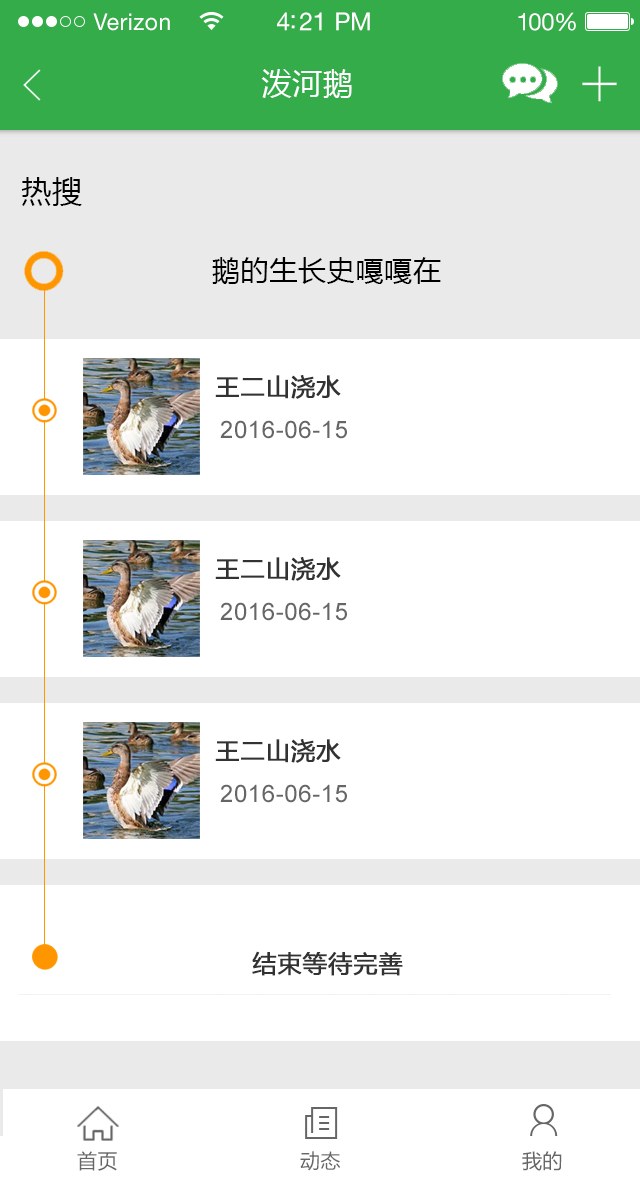
<style>
.page{position:relative;width:640px;height:1193px;background:#ffffff}
.page>*{position:absolute;margin:0}
.t1{font:23px "HelveticaNeueLTStd-Roman";letter-spacing:0.02em;color:#ffffff}
.t2{font:25px "HelveticaNeueLTStd-Roman";letter-spacing:-0.02em;color:#ffffff}
.t3{font:24px "HelveticaNeueLTStd-Roman";letter-spacing:-0.02em;color:#ffffff}
.t4{font:30px "MicrosoftYaHei";letter-spacing:0.025em;color:#ffffff}
.t5{font:30px "MicrosoftYaHei";letter-spacing:0.025em;color:#030303}
.t6{font:28px "MicrosoftYaHei";letter-spacing:0.025em;color:#000000}
.t7{font:24px "MicrosoftYaHei";letter-spacing:0.025em;color:#323232;font-weight:bold}
.t8{font:24px "ArialMT";letter-spacing:0.025em;color:#666666}
.t9{font:20px "MicrosoftYaHei";letter-spacing:0.025em;color:#666666}
</style>
<div class="page">
<p class="t1" style="left:93px;top:13px;width:77px;height:18px">Verizon</p>
<p class="t2" style="left:277px;top:12px;width:93px;height:19px">4:21 PM</p>
<p class="t3" style="left:518px;top:12px;width:58px;height:19px">100%</p>
<p class="t4" style="left:261px;top:69px;width:91px;height:29px">泼河鹅</p>
<p class="t5" style="left:21px;top:177px;width:61px;height:29px">热搜</p>
<p class="t6" style="left:212px;top:257px;width:229px;height:27px">鹅的生长史嘎嘎在</p>
<p class="t7" style="left:215px;top:375px;width:126px;height:24px">王二山浇水</p>
<p class="t8" style="left:220px;top:420px;width:127px;height:19px">2016-06-15</p>
<p class="t7" style="left:215px;top:557px;width:126px;height:24px">王二山浇水</p>
<p class="t8" style="left:220px;top:602px;width:127px;height:19px">2016-06-15</p>
<p class="t7" style="left:215px;top:739px;width:126px;height:24px">王二山浇水</p>
<p class="t8" style="left:220px;top:784px;width:127px;height:19px">2016-06-15</p>
<p class="t7" style="left:252px;top:951px;width:151px;height:25px">结束等待完善</p>
<p class="t9" style="left:77px;top:1151px;width:40px;height:20px">首页</p>
<p class="t9" style="left:300px;top:1151px;width:41px;height:20px">动态</p>
<p class="t9" style="left:522px;top:1151px;width:40px;height:20px">我的</p>
</div>
